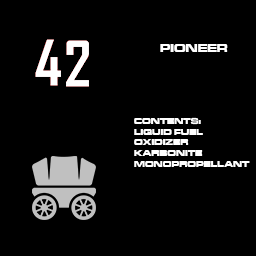
<style>
.page{position:relative;width:256px;height:256px;background:#000000}
.page>*{position:absolute;margin:0}
.t1{font:11.9px "MicrogrammaD-BoldExte";color:#ffffff}
.t2{font:8.9px "MicrogrammaD-BoldExte";color:#ffffff}
</style>
<div class="page">
<p class="t1" style="left:160px;top:44px;width:68px;height:8px">PIONEER</p>
<p class="t2" style="left:134px;top:117px;width:116px;height:50px">CONTENTS:<br>LIQUID FUEL<br>OXIDIZER<br>KARBONITE<br>MONOPROPELLANT</p>
</div>
